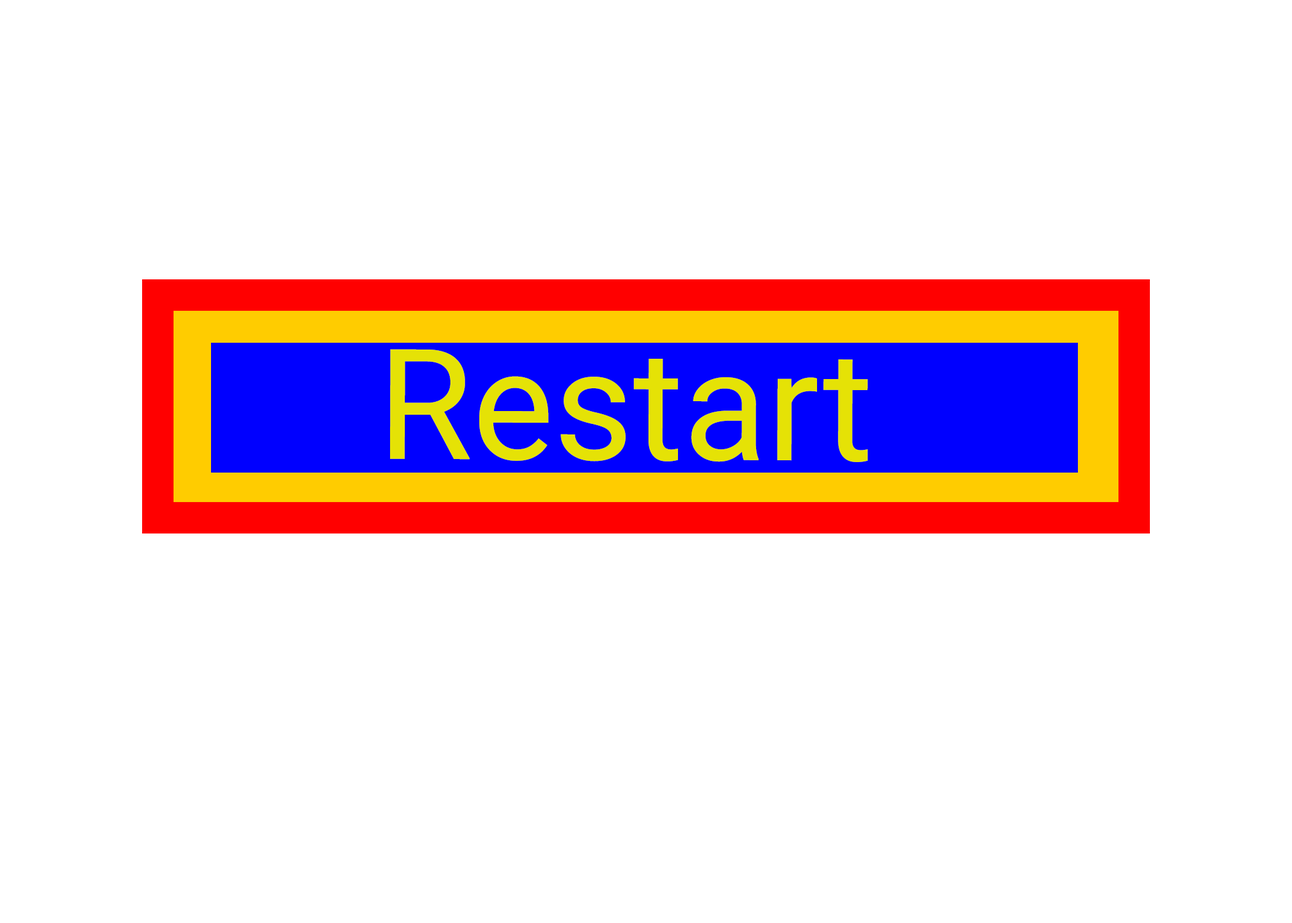
<style>
.page{position:relative;width:1292px;height:923px;background:#ffffff}
.page>*{position:absolute;margin:0}
.t1{font:153.8px "Roboto-Regular";color:#e5e206}
</style>
<div class="page">
<p class="t1" style="left:390px;top:349px;width:478px;height:113px">Restart</p>
</div>
